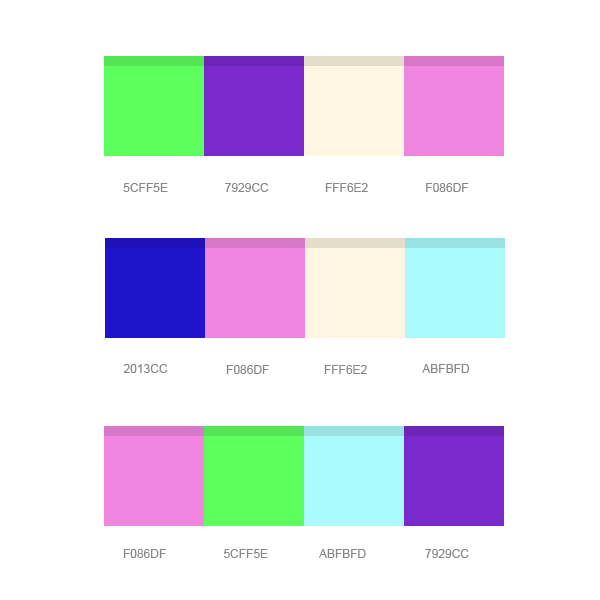
<style>
.page{position:relative;width:600px;height:600px;background:#ffffff}
.page>*{position:absolute;margin:0}
.t1{font:12px "ArialMT";color:#878787;text-transform:uppercase}
</style>
<div class="page">
<p class="t1" style="left:123px;top:183px;width:45px;height:9px">5cff5e</p>
<p class="t1" style="left:225px;top:183px;width:44px;height:9px">7929cc</p>
<p class="t1" style="left:325px;top:183px;width:43px;height:9px">fff6e2</p>
<p class="t1" style="left:426px;top:183px;width:43px;height:9px">f086df</p>
<p class="t1" style="left:123px;top:364px;width:45px;height:9px">2013cc</p>
<p class="t1" style="left:226px;top:365px;width:43px;height:9px">f086df</p>
<p class="t1" style="left:324px;top:365px;width:43px;height:9px">FFF6E2</p>
<p class="t1" style="left:422px;top:364px;width:48px;height:9px">abfbfd</p>
<p class="t1" style="left:123px;top:549px;width:43px;height:9px">F086DF</p>
<p class="t1" style="left:223px;top:549px;width:45px;height:9px">5CFF5E</p>
<p class="t1" style="left:319px;top:549px;width:47px;height:9px">ABFBFD</p>
<p class="t1" style="left:425px;top:549px;width:44px;height:9px">7929cc</p>
</div>
